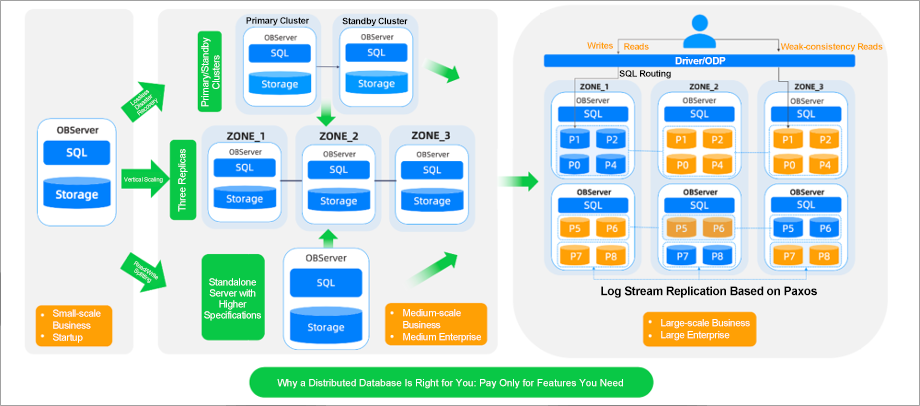
<style>
.page{position:relative;width:920px;height:406px;background:#f2f2f2}
.page>*{position:absolute;margin:0}
.t1{font:9px "Arial-BoldMT";letter-spacing:-0.03em;color:#000000}
.t2{font:10px "ArialMT";letter-spacing:-0.03em;color:#ffffff}
.t3{font:9px "Arial-BoldMT";letter-spacing:-0.03em;color:#ffa005}
.t4{font:10px "Arial-BoldMT";letter-spacing:-0.03em;color:#ffffff}
.t5{font:6px "ArialMT";letter-spacing:-0.03em}
.t6{font:10px/11px "ArialMT";letter-spacing:-0.03em;color:#ffffff}
.t7{font:12px "Arial-BoldMT";letter-spacing:-0.03em;color:#000000}
.t8{font:10px/12px "ArialMT";letter-spacing:-0.03em;color:#ffffff}
.t9{font:10px "ArialMT";color:#ffffff}
</style>
<div class="page">
<p class="t1" style="left:246px;top:17px;width:63px;height:9px">Primary Cluster</p>
<p class="t1" style="left:342px;top:17px;width:66px;height:9px">Standby Cluster</p>
<p class="t2" style="left:201px;top:37px;width:19px;height:70px;rotate:-90deg">Primary/Standby Clusters</p>
<p class="t3" style="left:587px;top:42px;width:26px;height:7px">Writes</p>
<p class="t3" style="left:624px;top:43px;width:25px;height:7px">Reads</p>
<p class="t3" style="left:780px;top:43px;width:103px;height:9px">Weak-consistency Reads</p>
<p class="t4" style="left:675px;top:57px;width:51px;height:8px">Driver/ODP</p>
<p class="t1" style="left:619px;top:70px;width:52px;height:9px">SQL Routing</p>
<p class="t2" style="left:178px;top:149px;width:10px;height:63px;rotate:-90deg">Three Replicas</p>
<p class="t5" style="left:124px;top:177px;width:39px;height:6px">Vertical Scaling</p>
<p class="t5" style="left:133px;top:261px;width:25px;height:22px;rotate:33deg">Read/Write Splitting</p>
<p class="t6" style="left:204px;top:278px;width:57px;height:43px;text-align:center">Standalone Server with Higher Specifications</p>
<p class="t7" style="left:601px;top:286px;width:216px;height:12px">Log Stream Replication Based on Paxos</p>
<p class="t8" style="left:53px;top:309px;width:48px;height:34px">Small-scale Business<br>Startup</p>
<p class="t8" style="left:403px;top:309px;width:78px;height:34px">Medium-scale Business<br>Medium Enterprise</p>
<p class="t8" style="left:661px;top:319px;width:89px;height:22px">Large-scale Business<br>Large Enterprise</p>
<p class="t9" style="left:277px;top:379px;width:346px;height:10px">Why a Distributed Database Is Right for You: Pay Only for Features You Need</p>
</div>
